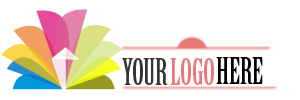
<style>
.page{position:relative;width:300px;height:100px;background:#ffffff}
.page>*{position:absolute;margin:0}
.t1{font:36px "BirchStd";letter-spacing:-0.01em;color:#363333}
.t2{font:36px "BirchStd";letter-spacing:-0.005em;color:#ea7878}
.t3{font:36px "BirchStd";letter-spacing:-0.01em;color:#020202}
</style>
<div class="page">
<p class="t1" style="left:122px;top:58px;width:46px;height:27px">YOUR</p>
<p class="t2" style="left:170px;top:58px;width:44px;height:27px">LOGO</p>
<p class="t3" style="left:216px;top:57px;width:47px;height:27px">HERE</p>
</div>
